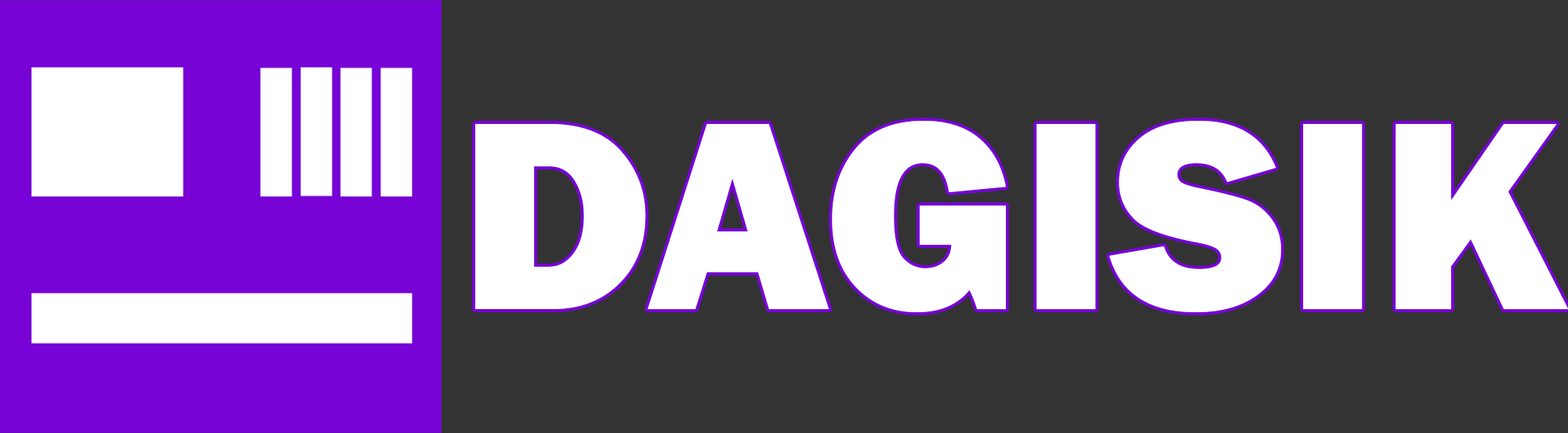
<style>
.page{position:relative;width:1568px;height:433px;background:#333333}
.page>*{position:absolute;margin:0}
.t1{font:277.4px "FranklinGothic-Heavy";color:#ffffff;scale:1.03 1}
</style>
<div class="page">
<p class="t1" style="left:475px;top:121px;width:1094px;height:191px">DAGISIK</p>
</div>
